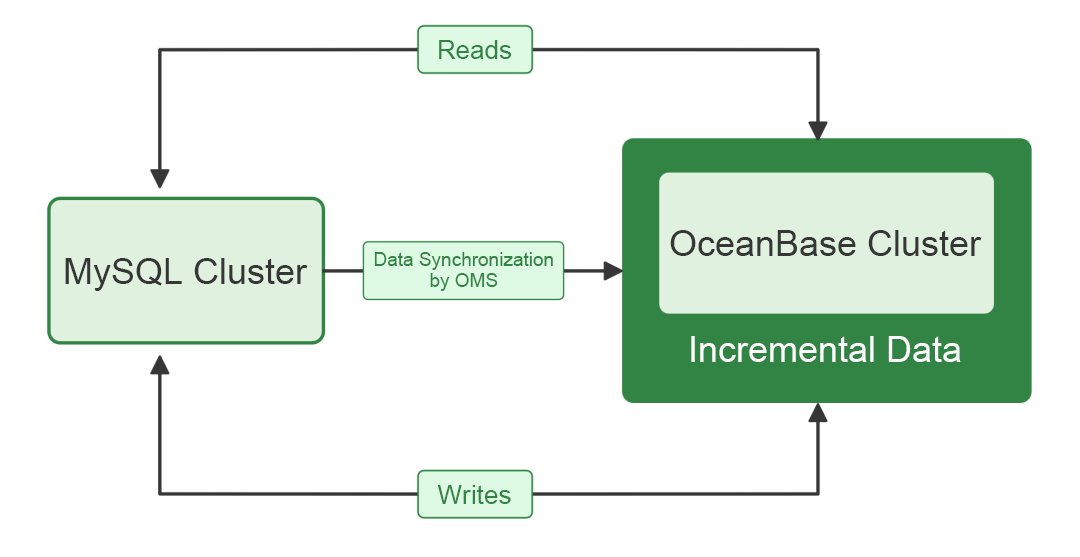
<style>
.page{position:relative;width:1080px;height:557px;background:#ffffff}
.page>*{position:absolute;margin:0}
.t1{font:26px "ArialMT";color:#328444}
.t2{font:36px "ArialMT";color:#363636}
.t3{font:19px/21px "ArialMT";color:#328444}
.t4{font:36px "ArialMT";color:#fcfcfc}
</style>
<div class="page">
<p class="t1" style="left:439px;top:40px;width:73px;height:19px">Reads</p>
<p class="t2" style="left:670px;top:230px;width:312px;height:26px">OceanBase Cluster</p>
<p class="t3" style="left:374px;top:252px;width:179px;height:39px;text-align:center">Data Synchronization by OMS</p>
<p class="t2" style="left:65px;top:258px;width:243px;height:33px">MySQL Cluster</p>
<p class="t4" style="left:691px;top:336px;width:270px;height:26px">Incremental Data</p>
<p class="t1" style="left:437px;top:485px;width:74px;height:19px">Writes</p>
</div>
